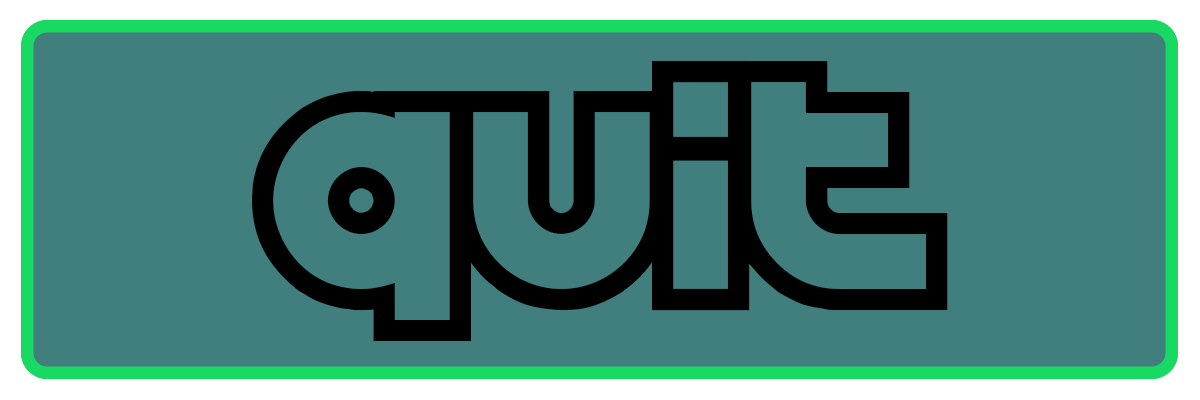
<style>
.page{position:relative;width:1200px;height:400px;background:#407f7d}
.page>*{position:absolute;margin:0}
.t1{font:319.9px "AstralDelightUpright";color:#000000}
</style>
<div class="page">
<p class="t1" style="left:252px;top:60px;width:696px;height:281px">QUIT</p>
</div>
